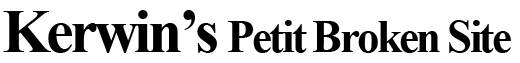
<style>
.page{position:relative;width:520px;height:63px;background:#ffffff}
.page>*{position:absolute;margin:0}
.t1{font:45px "TimesNewRomanPS-BoldMT";letter-spacing:-0.06em;color:#000000}
.t2{font:61.7px "TimesNewRomanPS-BoldMT";letter-spacing:-0.06em;color:#000000}
</style>
<div class="page">
<p class="t1" style="left:3px;top:10px;width:508px;height:43px"><span class="t2">Kerwin’s </span>Petit Broken Site</p>
</div>
